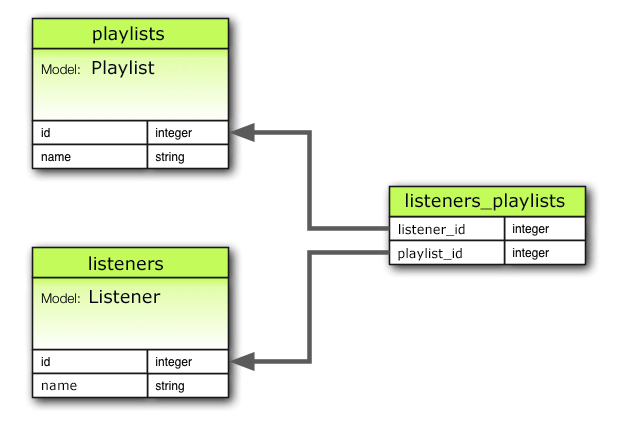
<style>
.page{position:relative;width:622px;height:425px;background:#ffffff}
.page>*{position:absolute;margin:0}
.t1{font:18px "Verdana";color:#040613}
.t2{font:13px "Verdana";color:#000000}
</style>
<div class="page">
<p class="t1" style="left:93px;top:26px;width:71px;height:18px">playlists</p>
<p class="t1" style="left:92px;top:60px;width:63px;height:18px">Playlist</p>
<p class="t1" style="left:406px;top:193px;width:159px;height:18px">listeners_playlists</p>
<p class="t2" style="left:399px;top:224px;width:66px;height:12px">listener_id</p>
<p class="t1" style="left:89px;top:256px;width:74px;height:15px">listeners</p>
<p class="t2" style="left:398px;top:248px;width:64px;height:13px">playlist_id</p>
<p class="t1" style="left:90px;top:290px;width:71px;height:14px">Listener</p>
<p class="t2" style="left:42px;top:382px;width:35px;height:9px">name</p>
</div>
